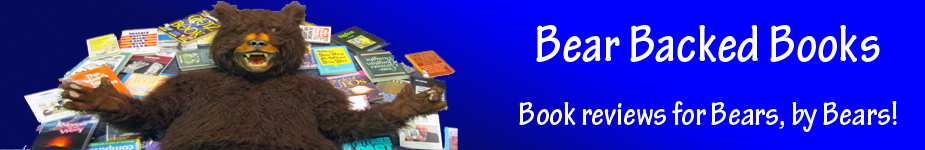
<style>
.page{position:relative;width:925px;height:150px;background:#0000ff}
.page>*{position:absolute;margin:0}
.t1{font:55px "TektonPro-BoldCond";color:#ffffff}
.t2{font:35px "TektonPro-BoldCond";color:#fdfdfd}
</style>
<div class="page">
<p class="t1" style="left:536px;top:25px;width:344px;height:37px">Bear Backed Books</p>
<p class="t2" style="left:519px;top:101px;width:378px;height:31px">Book reviews for Bears, by Bears!</p>
</div>
